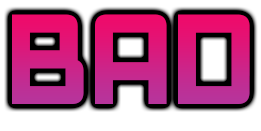
<style>
.page{position:relative;width:261px;height:131px;background:#ffffff}
.page>*{position:absolute;margin:0}
.t1{font:121.5px "Akashi"}
</style>
<div class="page">
<p class="t1" style="left:12px;top:14px;width:238px;height:90px">BAD</p>
</div>
